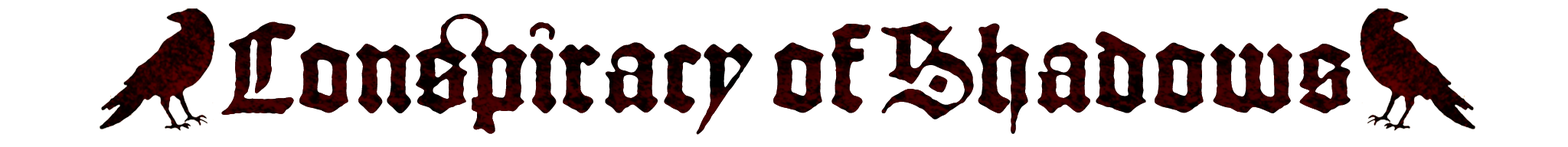
<style>
.page{position:relative;width:1568px;height:147px;background:#ffffff}
.page>*{position:absolute;margin:0}
.t1{font:130.2px "ALOTGutenbergC";letter-spacing:0.01em}
</style>
<div class="page">
<p class="t1" style="left:221px;top:14px;width:1130px;height:121px">Conspiracy of Shadows</p>
</div>
